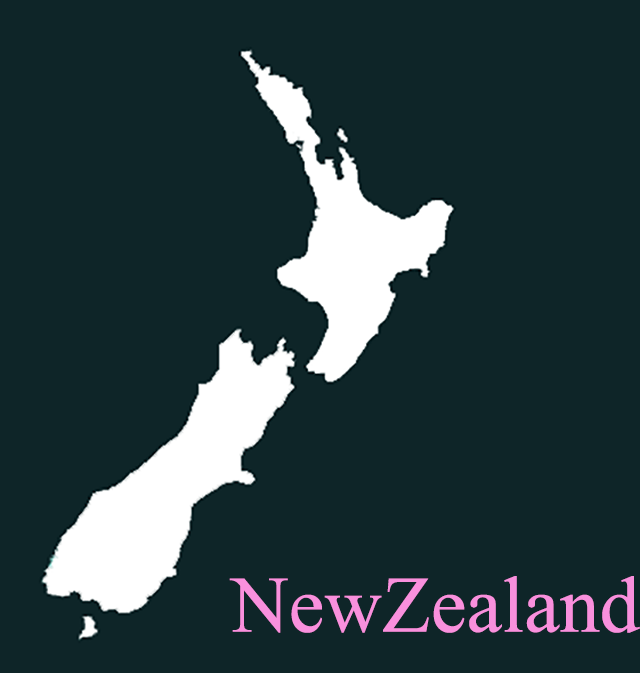
<style>
.page{position:relative;width:640px;height:673px;background:#0e2528}
.page>*{position:absolute;margin:0}
.t1{font:80px "TimesNewRomanPSMT";color:#f990dd}
</style>
<div class="page">
<p class="t1" style="left:229px;top:576px;width:411px;height:57px">NewZealand</p>
</div>
